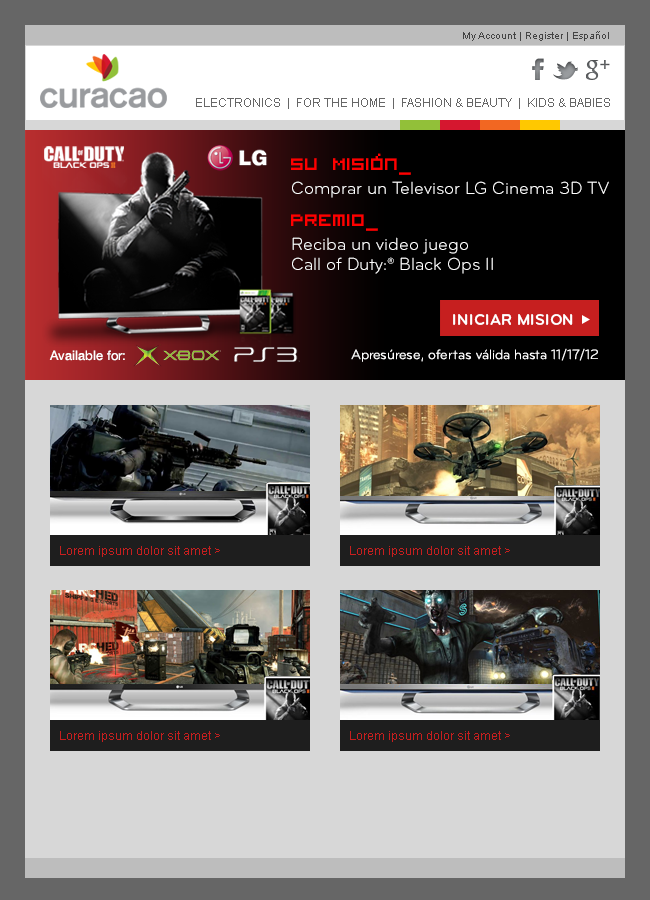
<style>
.page{position:relative;width:650px;height:900px;background:#d7d7d7}
.page>*{position:absolute;margin:0}
.t1{font:10px "ArialMT";color:#444444}
.t2{font:12px "ArialMT";color:#666666}
.t3{font:18px/24px "BryantPro-Regular";color:#ffffff}
.t4{font:30px/36px "VisitorTT2BRK";color:#ff0000}
.t5{font:30px/32px "VisitorTT2BRK";color:#ff0000}
.t6{font:18px/20px "BryantPro-Regular";color:#ffffff}
.t7{font:16px "BryantPro-Bold";color:#ffffff}
.t8{font:13px "HelveticaNeue-Roman";color:#ffffff}
.t9{font:14px "BryantPro-Regular";color:#ffffff}
.t10{font:12px "ArialMT";color:#c61f1f}
</style>
<div class="page">
<p class="t1" style="left:463px;top:31px;width:146px;height:10px">My Account | Register | Español</p>
<p class="t2" style="left:196px;top:98px;width:414px;height:11px">ELECTRONICS  |  FOR THE HOME  |  FASHION &amp; BEAUTY  |  KIDS &amp; BABIES</p>
<p class="t3" style="left:291px;top:153px;width:318px;height:121px"><span class="t4">Su Misión_<br></span>Comprar un Televisor LG Cinema 3D TV<br><span class="t5">Premio_<br></span>Reciba un video juego <br><span class="t6">Call of Duty:® Black Ops II</span></p>
<p class="t7" style="left:453px;top:314px;width:120px;height:11px">INICIAR MISION</p>
<p class="t8" style="left:49px;top:350px;width:76px;height:11px">Available for:</p>
<p class="t9" style="left:351px;top:348px;width:247px;height:14px">Apresúrese, ofertas válida hasta 11/17/12</p>
<p class="t10" style="left:60px;top:546px;width:160px;height:11px">Lorem ipsum dolor sit amet &gt;</p>
<p class="t10" style="left:350px;top:546px;width:160px;height:11px">Lorem ipsum dolor sit amet &gt;</p>
<p class="t10" style="left:60px;top:731px;width:160px;height:11px">Lorem ipsum dolor sit amet &gt;</p>
<p class="t10" style="left:350px;top:731px;width:160px;height:11px">Lorem ipsum dolor sit amet &gt;</p>
</div>
